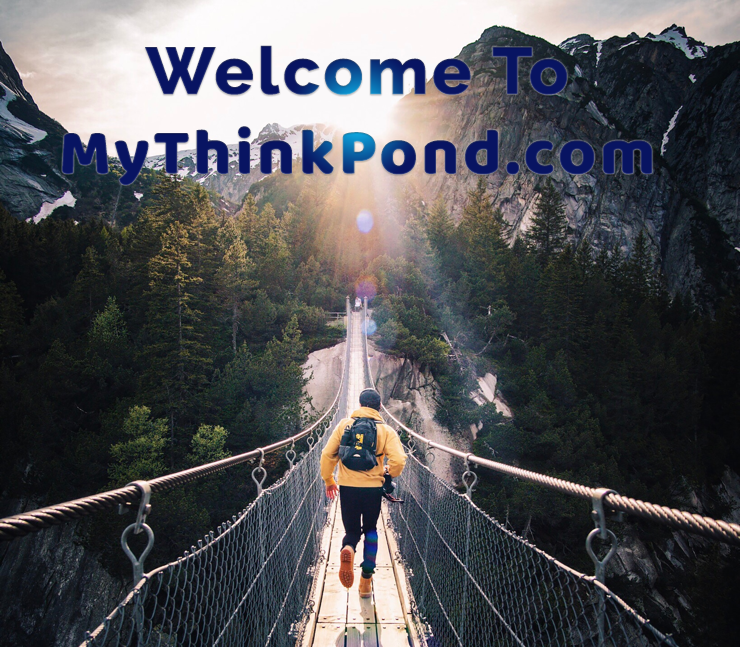
<style>
.page{position:relative;width:740px;height:647px}
.page>*{position:absolute;margin:0}
.t1{font:66.1px "Baloo-Regular";letter-spacing:0.05em;color:#750b1a}
.t2{font:66.1px "Raleway-ExtraBold";letter-spacing:0.05em;color:#0b1075}
</style>
<div class="page">
<p class="t1" style="left:62px;top:45px;width:591px;height:141px;text-align:center"><span class="t2">Welcome To<br></span>MyThinkPond.com</p>
</div>
